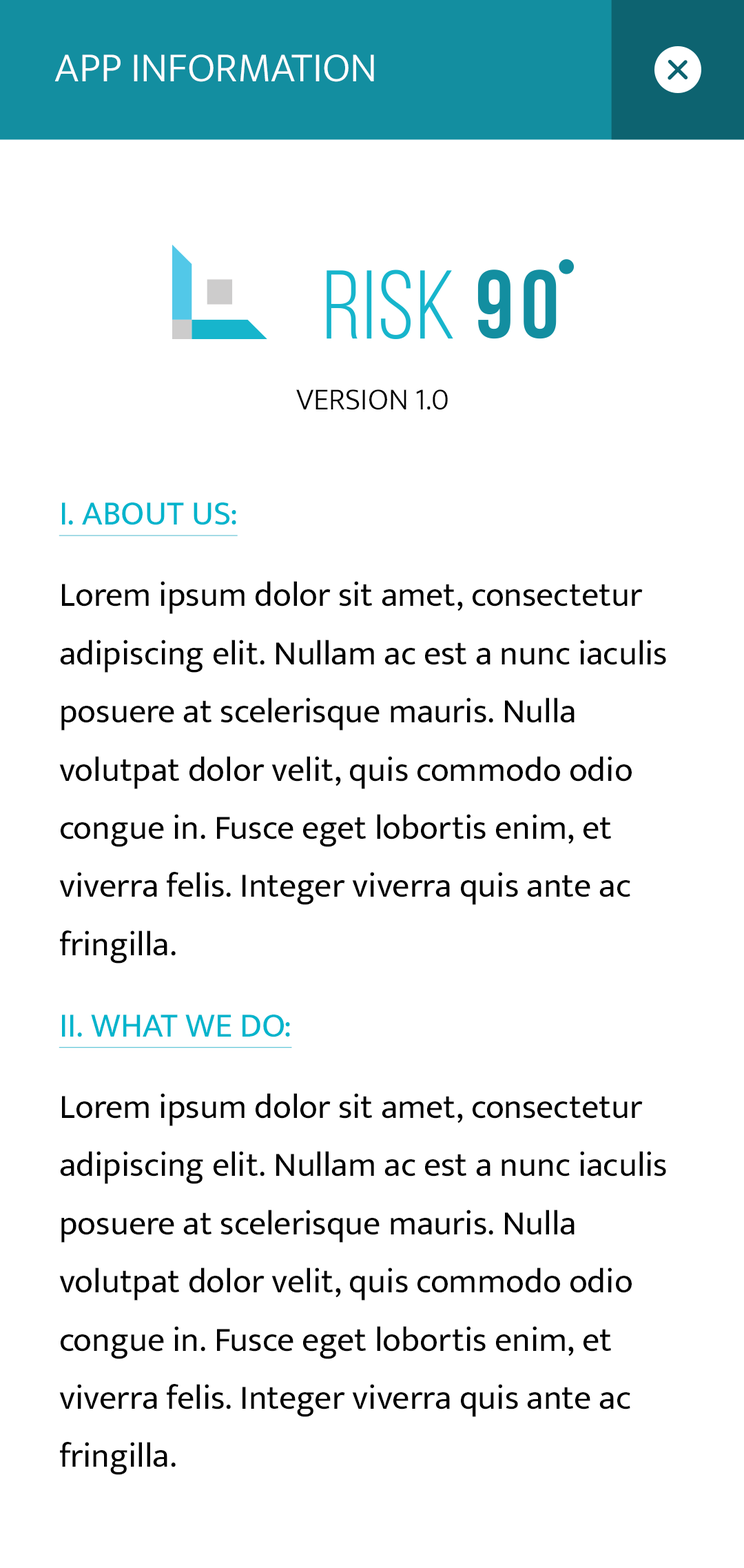
<style>
.page{position:relative;width:744px;height:1568px;background:#ffffff}
.page>*{position:absolute;margin:0}
.t1{font:41.9px "EkMukta-Light";color:#ffffff;text-transform:uppercase}
.t2{font:31px "EkMukta-Light";color:#000000;text-transform:uppercase}
.t3{font:34.5px/58.2px "EkMukta-Regular";color:#000000}
.t4{font:34.5px/81.4px "EkMukta-Regular";color:#00b4cc;text-transform:uppercase;text-decoration:underline}
.t5{font:34.5px/81.4px "EkMukta-Regular";color:#000000}
</style>
<div class="page">
<p class="t1" style="left:54px;top:54px;width:320px;height:28px">App Information</p>
<p class="t2" style="left:296px;top:389px;width:152px;height:21px">Version 1.0</p>
<p class="t3" style="left:59px;top:502px;width:607px;height:973px"><span class="t4">I. About US:<br></span><span class="t5">Lorem ipsum dolor sit amet, consectetur </span>adipiscing elit. Nullam ac est a nunc iaculis posuere at scelerisque mauris. Nulla volutpat dolor velit, quis commodo odio congue in. Fusce eget lobortis enim, et viverra felis. Integer viverra quis ante ac fringilla. <br><span class="t4">II. What we do:<br></span><span class="t5">Lorem ipsum dolor sit amet, consectetur </span>adipiscing elit. Nullam ac est a nunc iaculis posuere at scelerisque mauris. Nulla volutpat dolor velit, quis commodo odio congue in. Fusce eget lobortis enim, et viverra felis. Integer viverra quis ante ac fringilla.</p>
</div>
